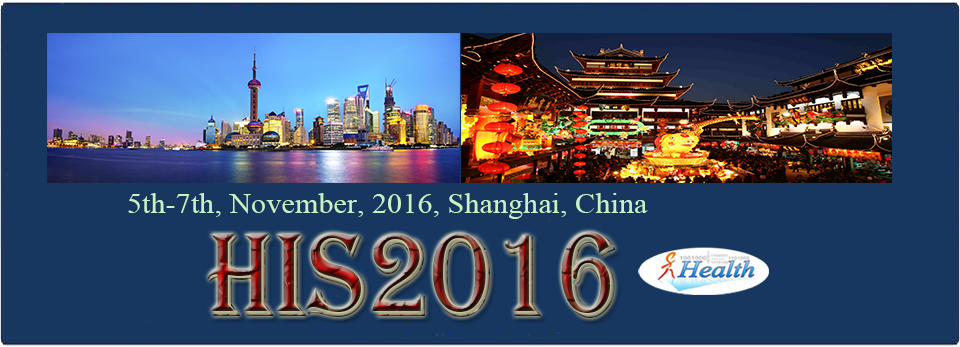
<style>
.page{position:relative;width:960px;height:347px;background:#173760}
.page>*{position:absolute;margin:0}
.t1{font:28.3px "TimesNewRomanPSMT";color:#c9f2c3;scale:1.07 1}
.t2{font:122.9px "Algerian";scale:0.87 1}
</style>
<div class="page">
<p class="t1" style="left:128px;top:193px;width:520px;height:26px">5th-7th, November, 2016, Shanghai, China</p>
<p class="t2" style="left:207px;top:232px;width:409px;height:86px">HIS2016</p>
</div>
